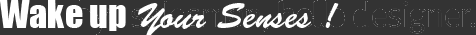
<style>
.page{position:relative;width:476px;height:35px;background:#333333}
.page>*{position:absolute;margin:0}
.t1{font:36px "BrushScriptStd";color:#ffffff}
.t2{font:36px "Impact";color:#ffffff}
</style>
<div class="page">
<p class="t1" style="left:0px;top:0px;width:339px;height:37px"><span class="t2">Wake up </span>Your Senses !</p>
</div>
